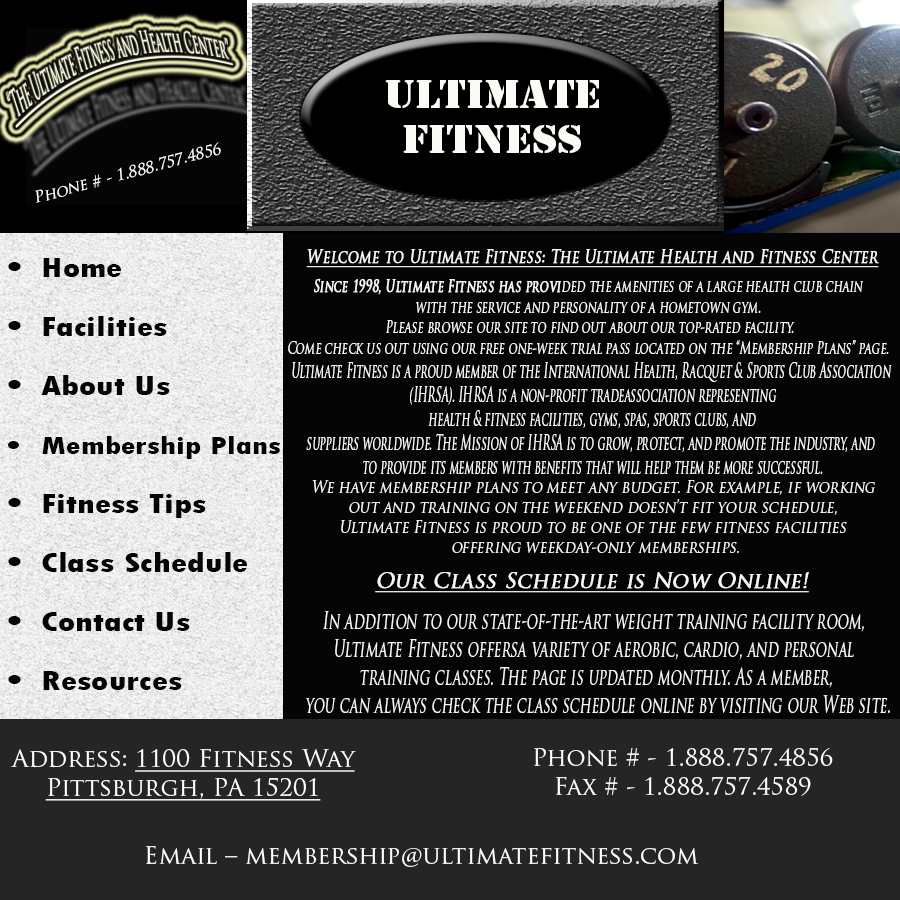
<style>
.page{position:relative;width:900px;height:900px;background:#050505}
.page>*{position:absolute;margin:0}
.t1{font:31.3px "TrajanPro-Regular";color:#f9fbf5;text-decoration:underline;scale:0.3 1}
.t2{font:37.1px "StencilStd";color:#f9fbf5;scale:1.1 1}
.t3{font:28.6px "TrajanPro-Regular";color:#f9fbf5;scale:1.1 1}
.t4{font:15.3px "TrajanPro-Regular";color:#fffffe;font-style:italic}
.t5{font:17.7px "TrajanPro-Regular";color:#f6f8f3;font-weight:bold;font-style:italic;text-decoration:underline;scale:0.77 1}
.t6{font:28.7px/59px "TwCenMT-CondensedExtraBold";color:#050505;scale:1.32 1}
.t7{font:25.7px/59px "TwCenMT-CondensedExtraBold";color:#050505;scale:1.32 1}
.t8{font:17.2px "TrajanPro-Regular";color:#f6f8f3;font-style:italic;scale:0.65 1}
.t9{font:17.2px "TrajanPro-Regular";color:#f6f8f3;font-weight:bold;font-style:italic;scale:0.65 1}
.t10{font:16.5px "TrajanPro-Regular";color:#f6f8f3;font-style:italic;scale:0.65 1}
.t11{font:20.1px "TrajanPro-Regular";color:#f6f8f3;font-style:italic;scale:0.52 1}
.t12{font:16.7px "TrajanPro-Regular";color:#f6f8f3;font-style:italic;scale:0.84 1}
.t13{font:20.5px "TrajanPro-Regular";color:#f6f8f3;font-weight:bold;font-style:italic;text-decoration:underline}
.t14{font:23.5px "TrajanPro-Regular";color:#f6f8f3;font-style:italic;scale:0.6 1}
.t15{font:24px "TrajanPro-Regular";color:#fefefe;text-decoration:underline}
.t16{font:24px "TrajanPro-Regular";color:#fefefe}
</style>
<div class="page">
<p class="t1" style="left:6px;top:30px;width:227px;height:98px;rotate:-15deg">“The Ultimate Fitness and Health Center”</p>
<p class="t2" style="left:385px;top:80px;width:214px;height:73px;text-align:center"><span class="t3"><br></span>Ultimate<br>fitness</p>
<p class="t4" style="left:35px;top:142px;width:186px;height:61px;rotate:-15deg">Phone # - 1.888.757.4856</p>
<p class="t5" style="left:306px;top:248px;width:573px;height:20px">Welcome to Ultimate Fitness: The Ultimate Health and Fitness Center</p>
<p class="t6" style="left:8px;top:258px;width:273px;height:432px">• Home<br>• Facilities<br>• About Us<br><span class="t7">• Membership Plans<br></span>• Fitness Tips<br>• Class Schedule<br>• Contact Us<br>• Resources</p>
<p class="t8" style="left:288px;top:278px;width:601px;height:76px;text-align:center"><span class="t9">Since 1998, Ultimate Fitness has provi</span>ded the amenities of a large health club chain<br>with the service and personality of a hometown gym.<br> Please browse our site to find out about our top-rated facility.<br>Come check us out using our free one-week trial pass located on the “Membership Plans” page<span class="t10">.</span></p>
<p class="t11" style="left:292px;top:362px;width:600px;height:113px;text-align:center">Ultimate Fitness is a proud member of the International Health, Racquet &amp; Sports Club Association <br>(IHRSA). IHRSA is a non-profit tradeassociation representing<br> health &amp; fitness facilities, gyms, spas, sports clubs, and <br>suppliers worldwide. The Mission of IHRSA is to grow, protect, and promote the industry, and <br>to provide its members with benefits that will help them be more successful.</p>
<p class="t12" style="left:312px;top:480px;width:563px;height:73px;text-align:center">We have membership plans to meet any budget. For example, if working <br>out and training on the weekend doesn’t fit your schedule, <br>Ultimate Fitness is proud to be one of the few fitness facilities <br>offering weekday-only memberships.</p>
<p class="t13" style="left:375px;top:572px;width:434px;height:21px">Our Class Schedule is Now Online!</p>
<p class="t14" style="left:306px;top:611px;width:584px;height:103px;text-align:center">In addition to our state-of-the-art weight training facility room, <br>Ultimate Fitness offersa variety of aerobic, cardio, and personal <br>training classes. The page is updated monthly. As a member,<br> you can always check the class schedule online by visiting our Web site.</p>
<p class="t15" style="left:11px;top:749px;width:345px;height:52px;text-align:center"><span class="t16">Address: </span>1100 Fitness Way<br>Pittsburgh, PA 15201</p>
<p class="t16" style="left:534px;top:748px;width:299px;height:48px;text-align:center">Phone # - 1.888.757.4856<br>Fax # - 1.888.757.4589</p>
<p class="t16" style="left:145px;top:846px;width:554px;height:21px">Email – membership@ultimatefitness.com</p>
</div>
